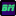
<style>
.page{position:relative;width:16px;height:16px;background:#08000b}
.page>*{position:absolute;margin:0}
.t1{font:9.2px "BladeRunnerMovieFont";color:#35db7f;scale:0.79 1}
</style>
<div class="page">
<p class="t1" style="left:1px;top:4px;width:14px;height:8px;rotate:-1deg">BM</p>
</div>
